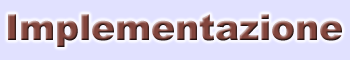
<style>
.page{position:relative;width:350px;height:60px;background:#e1e1ff}
.page>*{position:absolute;margin:0}
.t1{font:36px "Arial-Black"}
</style>
<div class="page">
<p class="t1" style="left:8px;top:14px;width:334px;height:33px">Implementazione</p>
</div>
